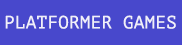
<style>
.page{position:relative;width:182px;height:45px;background:#4848cc}
.page>*{position:absolute;margin:0}
.t1{font:18px "PTMono-Regular";color:#f1f0f9}
</style>
<div class="page">
<p class="t1" style="left:5px;top:15px;width:171px;height:14px">PLATFORMER GAMES</p>
</div>
